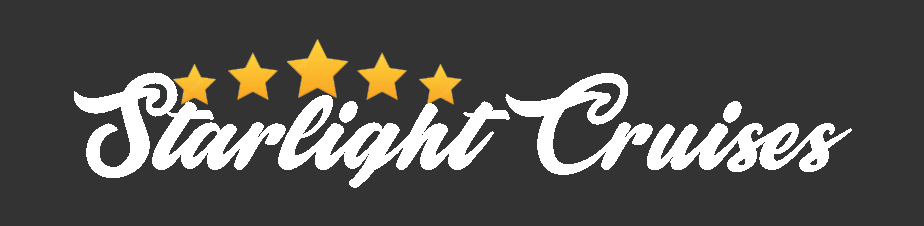
<style>
.page{position:relative;width:924px;height:226px;background:#333333}
.page>*{position:absolute;margin:0}
.t1{font:105px "Majesticpersonaluse-Regular";color:#ffffff}
</style>
<div class="page">
<p class="t1" style="left:74px;top:72px;width:778px;height:116px">Starlight Cruises</p>
</div>
